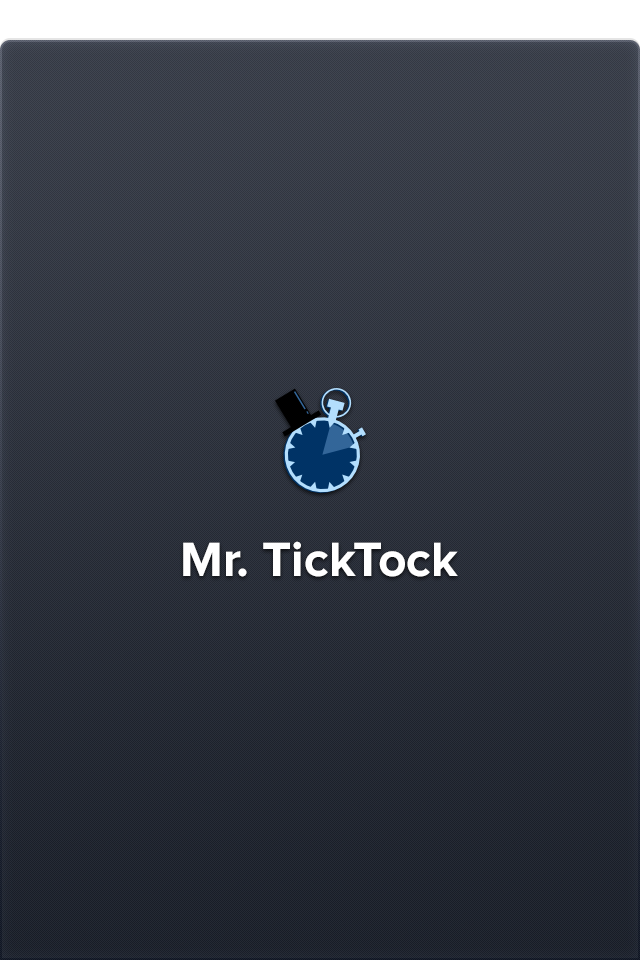
<style>
.page{position:relative;width:640px;height:960px}
.page>*{position:absolute;margin:0}
.t1{font:50px "ProximaNova-Bold";color:#ffffff}
</style>
<div class="page">
<p class="t1" style="left:183px;top:541px;width:275px;height:36px">Mr. TickTock</p>
</div>
